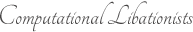
<style>
.page{position:relative;width:193px;height:32px;background:#ffffff}
.page>*{position:absolute;margin:0}
.t1{font:30px "Tangerine";color:#474545}
</style>
<div class="page">
<p class="t1" style="left:0px;top:1px;width:193px;height:31px">Computational Libationists</p>
</div>
